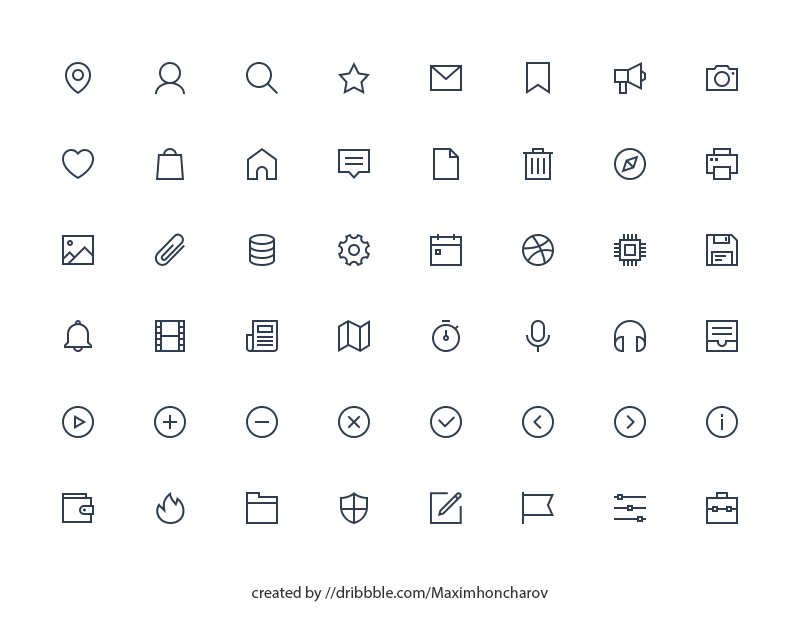
<style>
.page{position:relative;width:800px;height:632px;background:#ffffff}
.page>*{position:absolute;margin:0}
.t1{font:16px "MyriadPro-Regular";color:#333333}
</style>
<div class="page">
<p class="t1" style="left:252px;top:586px;width:296px;height:16px">created by //dribbble.com/Maximhoncharov</p>
</div>
